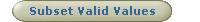
<style>
.page{position:relative;width:200px;height:22px;background:#ffffff}
.page>*{position:absolute;margin:0}
.t1{font:11px "Verdana-Bold";color:#336699}
</style>
<div class="page">
<p class="t1" style="left:30px;top:6px;width:125px;height:9px">Subset Valid Values</p>
</div>
